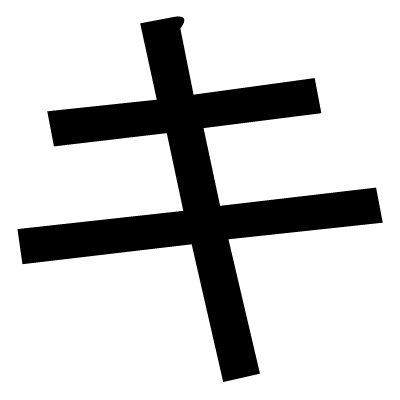
<style>
.page{position:relative;width:400px;height:400px;background:#ffffff}
.page>*{position:absolute;margin:0}
.t1{font:424.8px "MS-PGothic";color:#000000}
</style>
<div class="page">
<p class="t1" style="left:17px;top:16px;width:366px;height:366px">キ</p>
</div>
